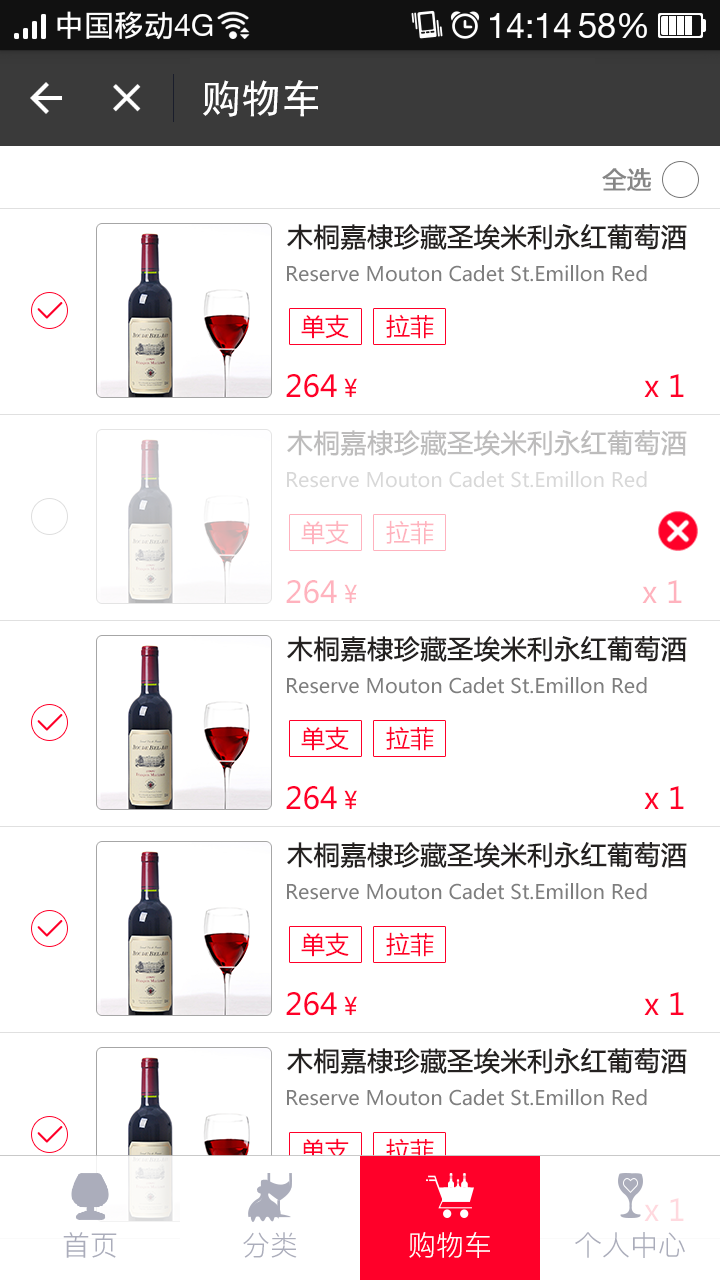
<style>
.page{position:relative;width:720px;height:1280px;background:#ffffff}
.page>*{position:absolute;margin:0}
.t1{font:40px "SimHei";color:#ffffff}
.t2{font:24px "MicrosoftYaHei";color:#868686;font-weight:bold}
.t3{font:26px "MicrosoftYaHei";color:#242120;font-weight:bold}
.t4{font:20px "MicrosoftYaHei";color:#7e7e7e}
.t5{font:24px "MicrosoftYaHei";color:#ff0029}
.t6{font:30px "MicrosoftYaHei";color:#ff0029}
.t7{font:26px "MicrosoftYaHei";color:#bdbcbc;font-weight:bold}
.t8{font:20px "MicrosoftYaHei";color:#d8d8d8}
.t9{font:24px "MicrosoftYaHei";color:#ffb2be}
.t10{font:30px "MicrosoftYaHei";color:#ffb2be}
.t11{font:30px "MicrosoftYaHei";color:#ffd9df}
.t12{font:28px "PingFang-SC-Regular";color:#abadbb;text-transform:uppercase}
.t13{font:28px "PingFang-SC-Regular";color:#ffffff;text-transform:uppercase}
</style>
<div class="page">
<p class="t1" style="left:203px;top:80px;width:115px;height:37px">购物车</p>
<p class="t2" style="left:602px;top:168px;width:49px;height:23px">全选</p>
<p class="t3" style="left:287px;top:224px;width:400px;height:26px">木桐嘉棣珍藏圣埃米利永红葡萄酒</p>
<p class="t4" style="left:287px;top:265px;width:360px;height:17px">Reserve Mouton Cadet St.Emillon Red</p>
<p class="t5" style="left:301px;top:314px;width:48px;height:25px">单支</p>
<p class="t5" style="left:386px;top:314px;width:48px;height:25px">拉菲</p>
<p class="t6" style="left:286px;top:374px;width:71px;height:24px">264 <span class="t5">¥</span></p>
<p class="t6" style="left:644px;top:374px;width:40px;height:23px">x 1</p>
<p class="t7" style="left:287px;top:430px;width:400px;height:26px">木桐嘉棣珍藏圣埃米利永红葡萄酒</p>
<p class="t8" style="left:287px;top:471px;width:360px;height:17px">Reserve Mouton Cadet St.Emillon Red</p>
<p class="t9" style="left:301px;top:520px;width:48px;height:25px">单支</p>
<p class="t9" style="left:386px;top:520px;width:48px;height:25px">拉菲</p>
<p class="t10" style="left:286px;top:580px;width:71px;height:24px">264 <span class="t9">¥</span></p>
<p class="t10" style="left:642px;top:580px;width:40px;height:23px">x 1</p>
<p class="t3" style="left:287px;top:636px;width:400px;height:26px">木桐嘉棣珍藏圣埃米利永红葡萄酒</p>
<p class="t4" style="left:287px;top:677px;width:360px;height:17px">Reserve Mouton Cadet St.Emillon Red</p>
<p class="t5" style="left:301px;top:726px;width:48px;height:25px">单支</p>
<p class="t5" style="left:386px;top:726px;width:48px;height:25px">拉菲</p>
<p class="t6" style="left:286px;top:786px;width:71px;height:24px">264 <span class="t5">¥</span></p>
<p class="t6" style="left:644px;top:786px;width:40px;height:23px">x 1</p>
<p class="t3" style="left:287px;top:842px;width:400px;height:26px">木桐嘉棣珍藏圣埃米利永红葡萄酒</p>
<p class="t4" style="left:287px;top:883px;width:360px;height:17px">Reserve Mouton Cadet St.Emillon Red</p>
<p class="t5" style="left:301px;top:932px;width:48px;height:25px">单支</p>
<p class="t5" style="left:386px;top:932px;width:48px;height:25px">拉菲</p>
<p class="t6" style="left:286px;top:992px;width:71px;height:24px">264 <span class="t5">¥</span></p>
<p class="t6" style="left:644px;top:992px;width:40px;height:23px">x 1</p>
<p class="t3" style="left:287px;top:1048px;width:400px;height:26px">木桐嘉棣珍藏圣埃米利永红葡萄酒</p>
<p class="t4" style="left:287px;top:1089px;width:360px;height:17px">Reserve Mouton Cadet St.Emillon Red</p>
<p class="t5" style="left:301px;top:1138px;width:48px;height:25px">单支</p>
<p class="t5" style="left:386px;top:1138px;width:48px;height:25px">拉菲</p>
<p class="t11" style="left:644px;top:1198px;width:40px;height:23px">x 1</p>
<p class="t12" style="left:63px;top:1232px;width:54px;height:26px">首页</p>
<p class="t12" style="left:243px;top:1232px;width:54px;height:26px">分类</p>
<p class="t13" style="left:409px;top:1232px;width:81px;height:26px">购物车</p>
<p class="t12" style="left:575px;top:1232px;width:110px;height:26px">个人中心</p>
</div>
